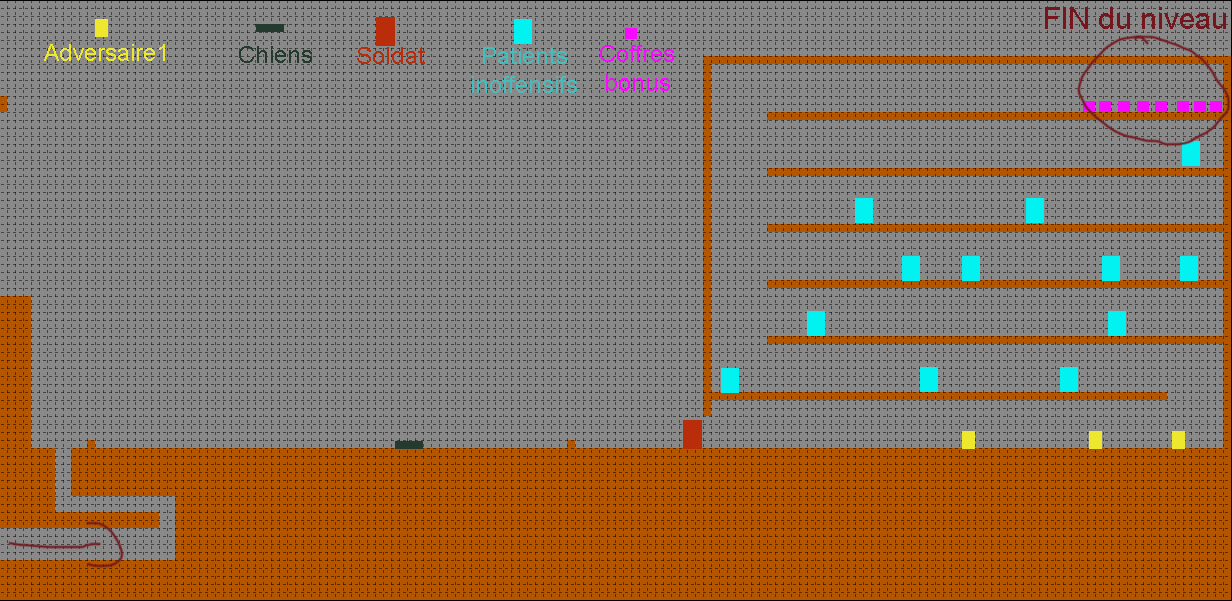
<style>
.page{position:relative;width:1232px;height:601px;background:#898989}
.page>*{position:absolute;margin:0}
.t1{font:30px "ArialMT";color:#75161e}
.t2{font:24px "ArialMT";color:#ede72d}
.t3{font:24px "ArialMT";color:#253a2e}
.t4{font:24px "ArialMT";color:#ba2d0a}
.t5{font:24px "ArialMT";color:#46bdbd}
.t6{font:24px "ArialMT";color:#f70aff}
</style>
<div class="page">
<p class="t1" style="left:1045px;top:7px;width:181px;height:22px">FIN du niveau</p>
<p class="t2" style="left:44px;top:44px;width:121px;height:17px">Adversaire1</p>
<p class="t3" style="left:239px;top:46px;width:73px;height:17px">Chiens</p>
<p class="t4" style="left:357px;top:47px;width:68px;height:17px">Soldat</p>
<p class="t5" style="left:472px;top:47px;width:105px;height:46px;text-align:center">Patients inoffensifs</p>
<p class="t6" style="left:600px;top:45px;width:74px;height:46px;text-align:center">Coffres bonus</p>
</div>
